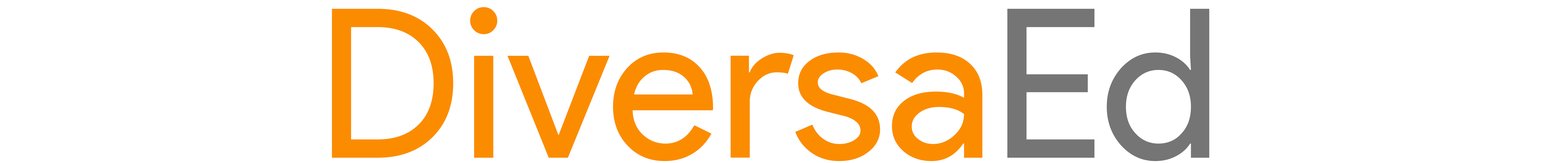
<style>
.page{position:relative;width:1568px;height:163px;background:#ffffff}
.page>*{position:absolute;margin:0}
.t1{font:208.2px "ProductSans-Regular";color:#fb8c00}
.t2{font:208.2px "ProductSans-Regular";color:#757575}
</style>
<div class="page">
<p class="t1" style="left:332px;top:7px;width:877px;height:155px">Diversa<span class="t2">Ed</span></p>
</div>
